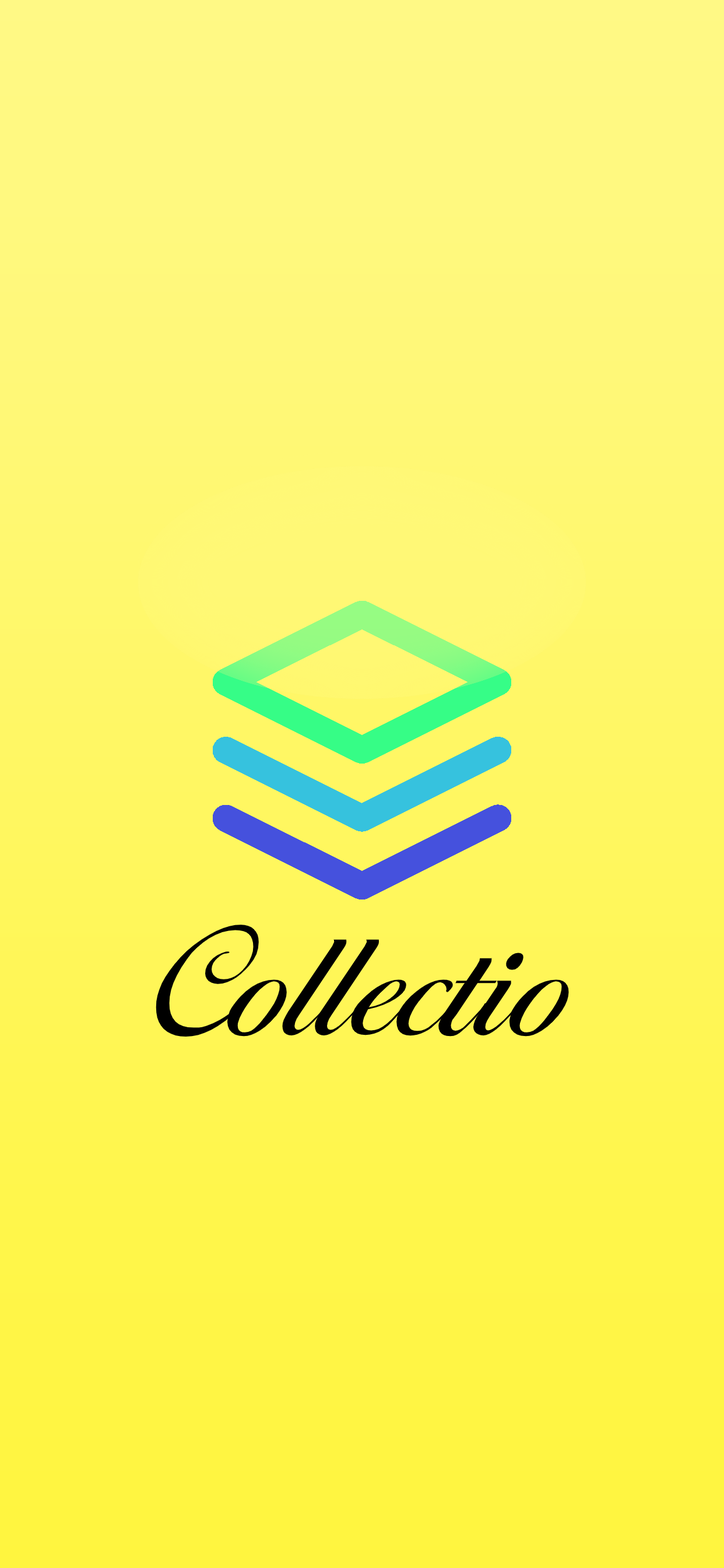
<style>
.page{position:relative;width:724px;height:1568px}
.page>*{position:absolute;margin:0}
.t1{font:210px "Ballantines-Regular";color:#000000}
</style>
<div class="page">
<p class="t1" style="left:156px;top:925px;width:413px;height:112px">Collectio</p>
</div>
